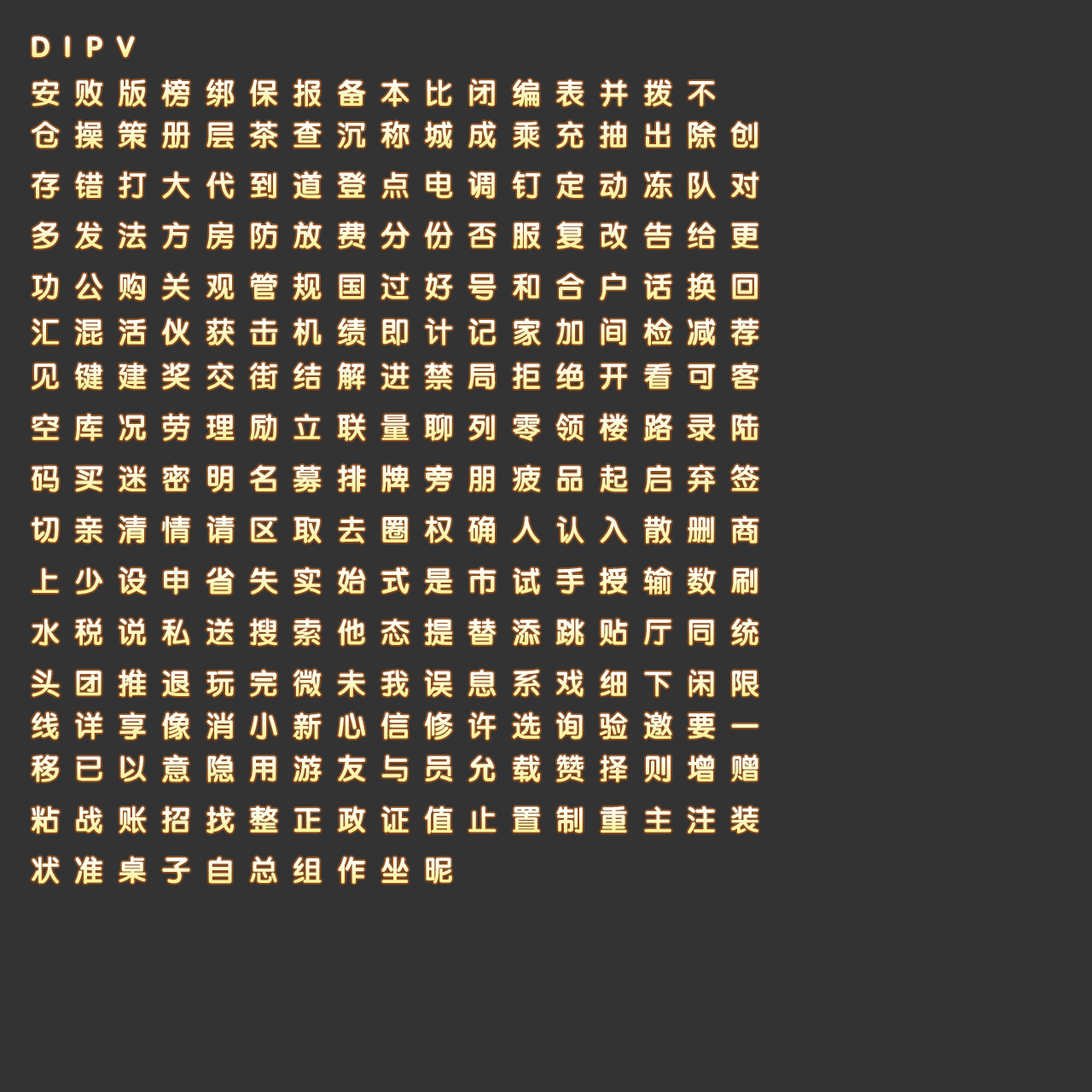
<style>
.page{position:relative;width:1092px;height:1092px;background:#333333}
.page>*{position:absolute;margin:0}
.t1{font:29px "FZY4JW--GB1-0";letter-spacing:0.5em}
</style>
<div class="page">
<p class="t1" style="left:32px;top:36px;width:103px;height:21px">DIPV</p>
<p class="t1" style="left:32px;top:78px;width:683px;height:29px">安败版榜绑保报备本比闭编表并拨不</p>
<p class="t1" style="left:32px;top:120px;width:726px;height:29px">仓操策册层茶查沉称城成乘充抽出除创</p>
<p class="t1" style="left:32px;top:171px;width:727px;height:28px">存错打大代到道登点电调钉定动冻队对</p>
<p class="t1" style="left:32px;top:221px;width:726px;height:28px">多发法方房防放费分份否服复改告给更</p>
<p class="t1" style="left:32px;top:273px;width:726px;height:27px">功公购关观管规国过好号和合户话换回</p>
<p class="t1" style="left:32px;top:317px;width:726px;height:29px">汇混活伙获击机绩即计记家加间检减荐</p>
<p class="t1" style="left:32px;top:362px;width:726px;height:28px">见键建奖交街结解进禁局拒绝开看可客</p>
<p class="t1" style="left:32px;top:413px;width:726px;height:28px">空库况劳理励立联量聊列零领楼路录陆</p>
<p class="t1" style="left:32px;top:464px;width:727px;height:29px">码买迷密明名募排牌旁朋疲品起启弃签</p>
<p class="t1" style="left:32px;top:515px;width:726px;height:28px">切亲清情请区取去圈权确人认入散删商</p>
<p class="t1" style="left:32px;top:566px;width:726px;height:29px">上少设申省失实始式是市试手授输数刷</p>
<p class="t1" style="left:32px;top:618px;width:726px;height:28px">水税说私送搜索他态提替添跳贴厅同统</p>
<p class="t1" style="left:32px;top:669px;width:726px;height:28px">头团推退玩完微未我误息系戏细下闲限</p>
<p class="t1" style="left:32px;top:711px;width:726px;height:30px">线详享像消小新心信修许选询验邀要一</p>
<p class="t1" style="left:32px;top:754px;width:726px;height:28px">移已以意隐用游友与员允载赞择则增赠</p>
<p class="t1" style="left:32px;top:805px;width:726px;height:29px">粘战账招找整正政证值止置制重主注装</p>
<p class="t1" style="left:32px;top:856px;width:420px;height:28px">状准桌子自总组作坐昵</p>
</div>
